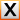
<style>
.page{position:relative;width:20px;height:20px}
.page>*{position:absolute;margin:0}
.t1{font:18.2px "MyriadPro-Regular";color:#040404;font-weight:bold;scale:1.23 1}
</style>
<div class="page">
<p class="t1" style="left:4px;top:3px;width:13px;height:14px">X</p>
</div>
